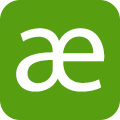
<style>
.page{position:relative;width:120px;height:120px;background:#579e11}
.page>*{position:absolute;margin:0}
.t1{font:125px "MyriadPro-Regular";color:#ffffff}
</style>
<div class="page">
<p class="t1" style="left:16px;top:28px;width:89px;height:64px">æ</p>
</div>
